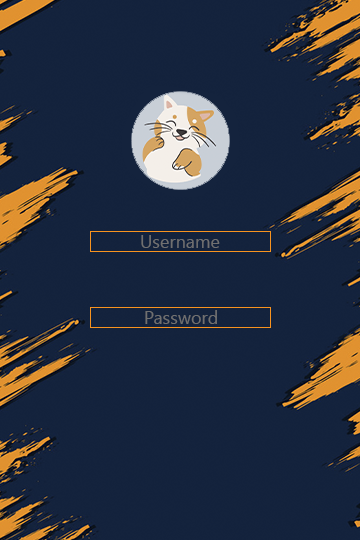
<style>
.page{position:relative;width:360px;height:540px;background:#14233d}
.page>*{position:absolute;margin:0}
.t1{font:18px "SegoeUI";color:#707070}
</style>
<div class="page">
<p class="t1" style="left:141px;top:235px;width:79px;height:13px">Username</p>
<p class="t1" style="left:145px;top:310px;width:72px;height:14px">Password</p>
</div>
